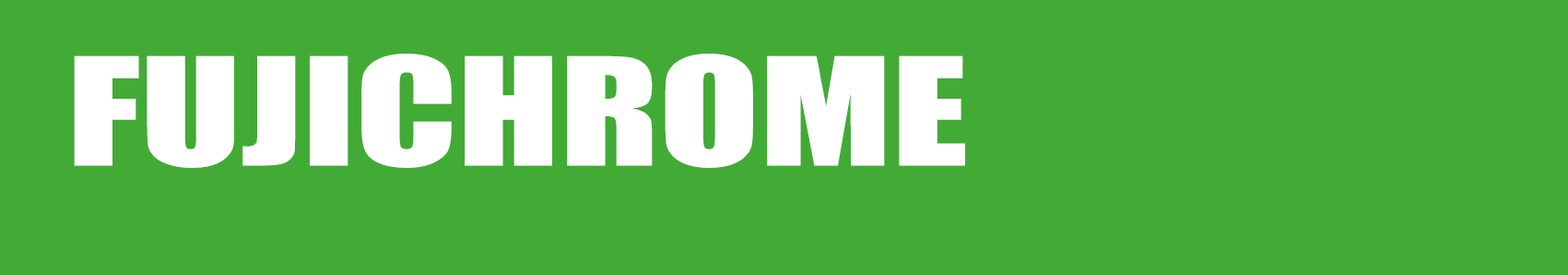
<style>
.page{position:relative;width:1568px;height:275px;background:#42ab35}
.page>*{position:absolute;margin:0}
.t1{font:138.3px "Impact";color:#ffffff;scale:1.33 1}
</style>
<div class="page">
<p class="t1" style="left:74px;top:53px;width:891px;height:115px">FUJICHROME</p>
</div>
